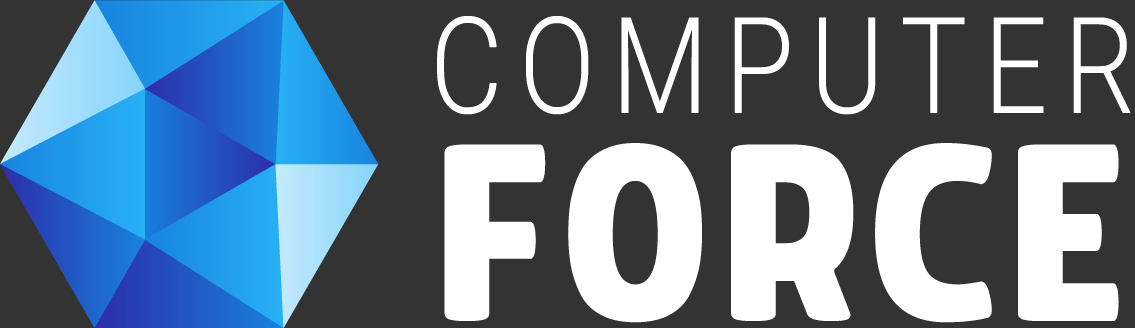
<style>
.page{position:relative;width:1135px;height:328px;background:#333333}
.page>*{position:absolute;margin:0}
.t1{font:134.4px/84px "Roboto-Light";letter-spacing:0.16em;color:#ffffff;scale:0.83 1}
.t2{font:294px/237px "Morl-Bold";letter-spacing:0.02em;color:#ffffff}
</style>
<div class="page">
<p class="t1" style="left:437px;top:16px;width:694px;height:307px">COMPUTER<br><span class="t2">FORCE</span></p>
</div>
